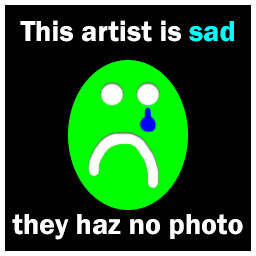
<style>
.page{position:relative;width:256px;height:256px;background:#000000}
.page>*{position:absolute;margin:0}
.t1{font:30px "FranklinGothic-Demi";color:#ffffff}
.t2{font:30px "FranklinGothic-Demi";color:#00fefe}
</style>
<div class="page">
<p class="t1" style="left:20px;top:20px;width:214px;height:22px">This artist is <span class="t2">sad</span></p>
<p class="t1" style="left:12px;top:214px;width:231px;height:26px">they haz no photo</p>
</div>
